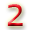
<style>
.page{position:relative;width:30px;height:30px;background:#ffffff}
.page>*{position:absolute;margin:0}
.t1{font:30px "Verdana"}
</style>
<div class="page">
<p class="t1" style="left:7px;top:4px;width:16px;height:22px">2</p>
</div>
